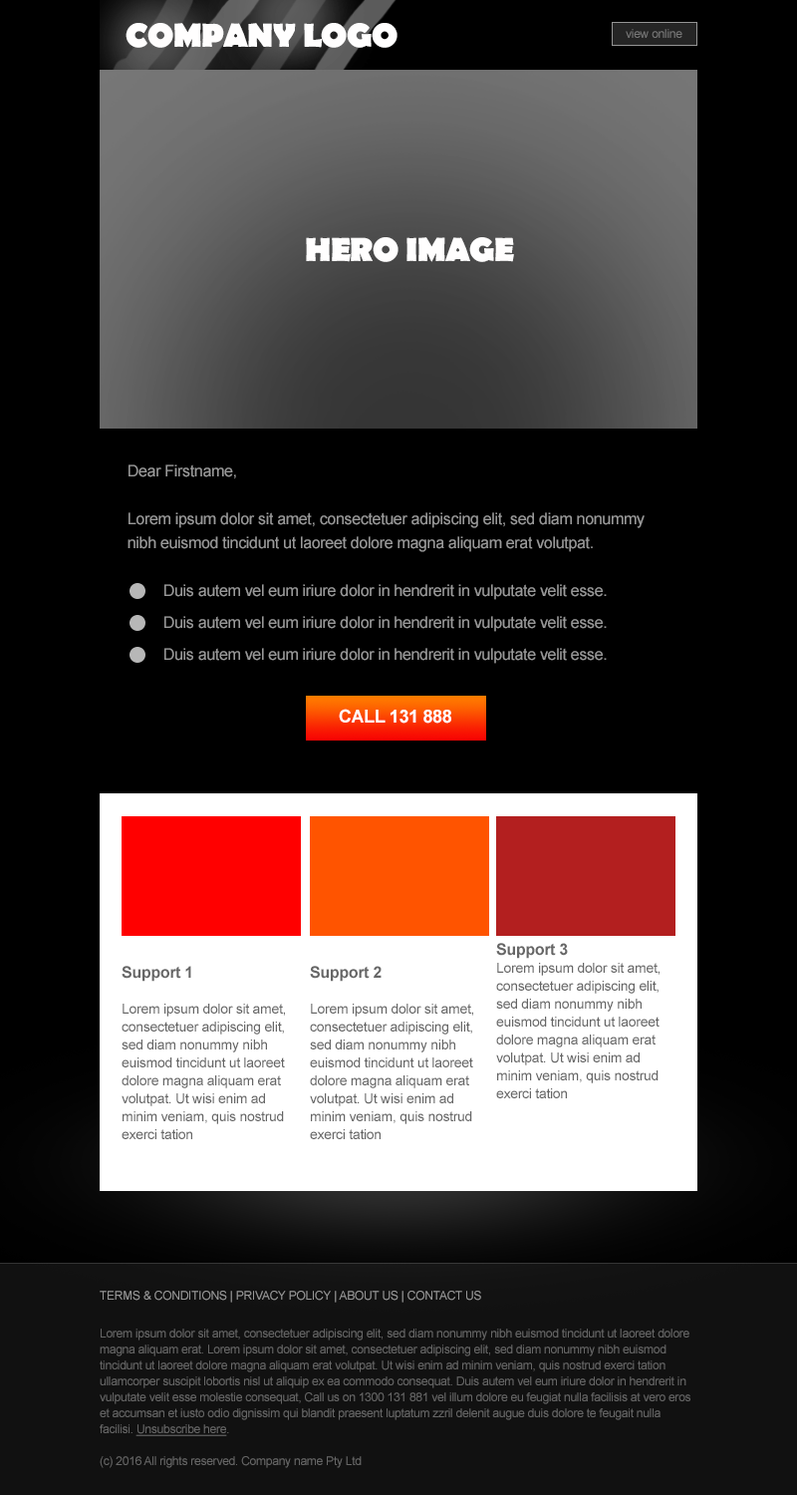
<style>
.page{position:relative;width:797px;height:1495px;background:#000000}
.page>*{position:absolute;margin:0}
.t1{font:34px "BerlinSansFB-Bold";letter-spacing:-0.02em;color:#fffefe;text-transform:uppercase}
.t2{font:12px "ArialMT";letter-spacing:-0.02em;color:#787878}
.t3{font:15.9px/31.9px "ArialMT";letter-spacing:-0.02em;color:#999999}
.t4{font:15.9px/23.9px "ArialMT";letter-spacing:-0.02em;color:#999999}
.t5{font:17.9px "Arial-BoldMT";letter-spacing:-0.02em;color:#ffffff}
.t6{font:14px/17.9px "ArialMT";letter-spacing:-0.02em;color:#666666}
.t7{font:15.9px/17.9px "Arial-BoldMT";letter-spacing:-0.02em;color:#666666}
.t8{font:12px "ArialMT";letter-spacing:-0.02em;color:#999999;text-transform:uppercase}
.t9{font:12px/15.9px "ArialMT";letter-spacing:-0.02em;color:#666666}
.t10{font:12px/15.9px "ArialMT";letter-spacing:-0.02em;color:#666666;text-decoration:underline}
</style>
<div class="page">
<p class="t1" style="left:126px;top:23px;width:272px;height:25px">COMPANY LOGO</p>
<p class="t2" style="left:626px;top:29px;width:57px;height:9px">view online</p>
<p class="t1" style="left:306px;top:237px;width:208px;height:25px">HERO IMAGE</p>
<p class="t3" style="left:128px;top:465px;width:517px;height:199px"><span class="t4">Dear Firstname,<br><br>Lorem ipsum dolor sit amet, consectetuer adipiscing elit, sed diam nonummy nibh euismod tincidunt ut laoreet dolore magna aliquam erat volutpat. <br><br></span> Duis autem vel eum iriure dolor in hendrerit in vulputate velit esse.<br> Duis autem vel eum iriure dolor in hendrerit in vulputate velit esse.<br> Duis autem vel eum iriure dolor in hendrerit in vulputate velit esse.</p>
<p class="t5" style="left:339px;top:709px;width:113px;height:15px">CALL 131 888</p>
<p class="t6" style="left:496px;top:943px;width:164px;height:156px"><span class="t7">Support 3<br></span>Lorem ipsum dolor sit amet, consectetuer adipiscing elit, sed diam nonummy nibh euismod tincidunt ut laoreet dolore magna aliquam erat volutpat. Ut wisi enim ad minim veniam, quis nostrud exerci tation</p>
<p class="t6" style="left:122px;top:966px;width:163px;height:173px"><span class="t7">Support 1<br></span><br>Lorem ipsum dolor sit amet, consectetuer adipiscing elit, sed diam nonummy nibh euismod tincidunt ut laoreet dolore magna aliquam erat volutpat. Ut wisi enim ad minim veniam, quis nostrud exerci tation</p>
<p class="t6" style="left:310px;top:966px;width:163px;height:173px"><span class="t7">Support 2<br></span><br>Lorem ipsum dolor sit amet, consectetuer adipiscing elit, sed diam nonummy nibh euismod tincidunt ut laoreet dolore magna aliquam erat volutpat. Ut wisi enim ad minim veniam, quis nostrud exerci tation</p>
<p class="t8" style="left:100px;top:1291px;width:381px;height:12px">Terms &amp; CONDITIONS | PRIVACY POLICY | ABOUT US | CONTACT US</p>
<p class="t9" style="left:100px;top:1329px;width:591px;height:139px">Lorem ipsum dolor sit amet, consectetuer adipiscing elit, sed diam nonummy nibh euismod tincidunt ut laoreet dolore magna aliquam erat. Lorem ipsum dolor sit amet, consectetuer adipiscing elit, sed diam nonummy nibh euismod tincidunt ut laoreet dolore magna aliquam erat volutpat. Ut wisi enim ad minim veniam, quis nostrud exerci tation ullamcorper suscipit lobortis nisl ut aliquip ex ea commodo consequat. Duis autem vel eum iriure dolor in hendrerit in vulputate velit esse molestie consequat, Call us on 1300 131 881 vel illum dolore eu feugiat nulla facilisis at vero eros et accumsan et iusto odio dignissim qui blandit praesent luptatum zzril delenit augue duis dolore te feugait nulla facilisi. <span class="t10">Unsubscribe here</span>.<br><br>(c) 2016 All rights reserved. Company name Pty Ltd</p>
</div>
